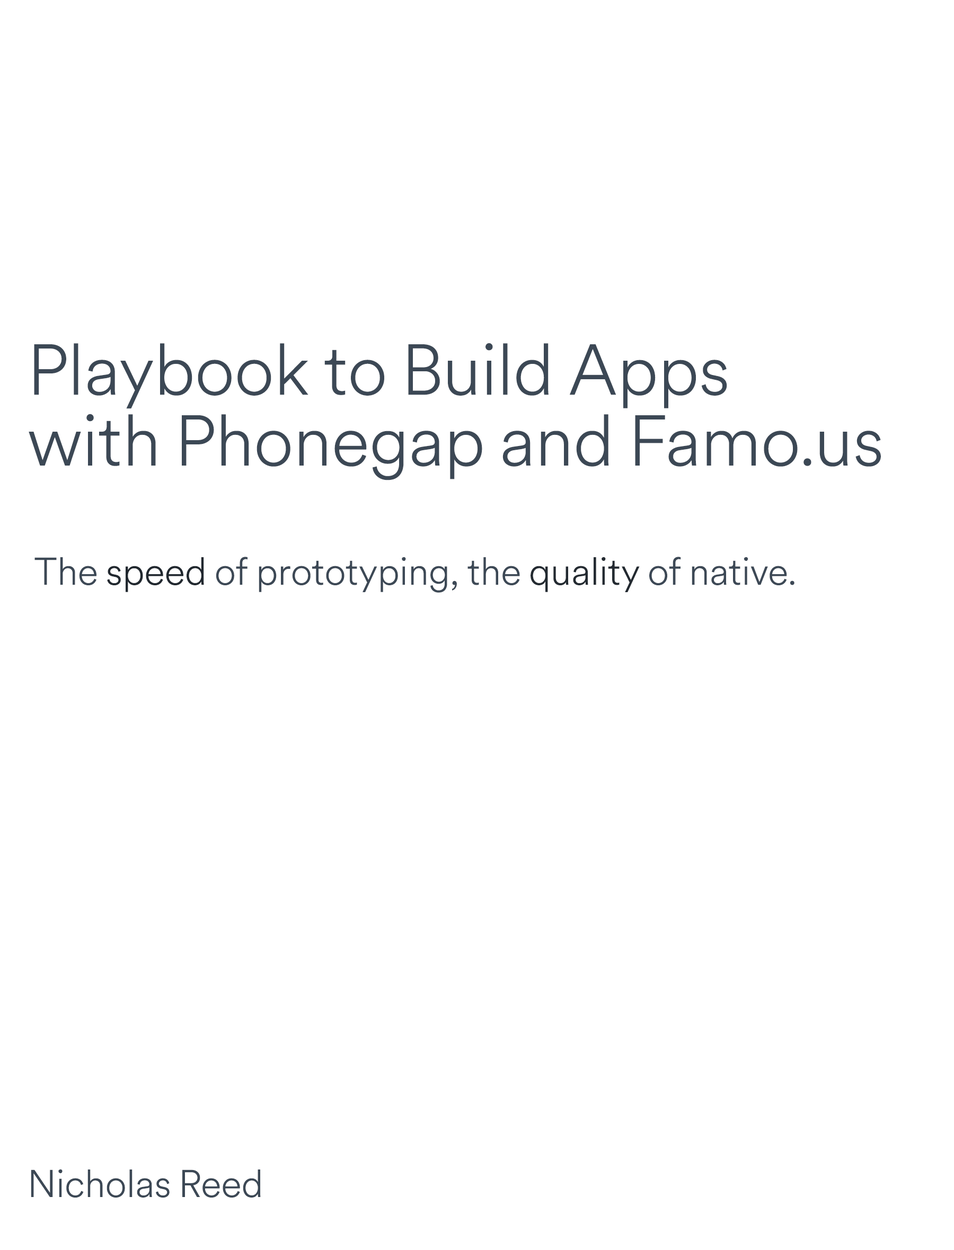
<style>
.page{position:relative;width:954px;height:1250px;background:#ffffff}
.page>*{position:absolute;margin:0}
.t1{font:70.9px/70.9px "CircularAir-Light";color:#3c4855}
.t2{font:38.1px "CircularAir-Light";color:#3c4855}
.t3{font:38.1px "CircularAir-Light";color:#21282f}
.t4{font:38.1px "CircularAir-Light";color:#232a31}
</style>
<div class="page">
<p class="t1" style="left:29px;top:343px;width:852px;height:138px">Playbook to Build Apps <br>with Phonegap and Famo.us</p>
<p class="t2" style="left:34px;top:557px;width:760px;height:36px">The <span class="t3">speed </span>of prototyping, the <span class="t4">quality </span>of native.</p>
<p class="t2" style="left:31px;top:1169px;width:230px;height:29px">Nicholas Reed</p>
</div>
